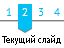
<style>
.page{position:relative;width:64px;height:48px;background:#ffffff}
.page>*{position:absolute;margin:0}
.t1{font:11px "PTSans-Regular";color:#00bff3}
.t2{font:11px "PTSans-Regular";color:#ffffff}
.t3{font:9px "PTSans-Regular";color:#000000}
</style>
<div class="page">
<p class="t1" style="left:6px;top:8px;width:6px;height:8px">1</p>
<p class="t2" style="left:22px;top:8px;width:6px;height:8px">2</p>
<p class="t1" style="left:39px;top:8px;width:5px;height:8px">3</p>
<p class="t1" style="left:54px;top:8px;width:6px;height:8px">4</p>
<p class="t3" style="left:2px;top:35px;width:59px;height:10px">Текущий слайд</p>
</div>
